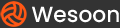
<style>
.page{position:relative;width:120px;height:28px;background:#333333}
.page>*{position:absolute;margin:0}
.t1{font:21.8px "Poppins-Medium";color:#ffffff}
</style>
<div class="page">
<p class="t1" style="left:32px;top:6px;width:87px;height:17px">Wesoon</p>
</div>
